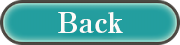
<style>
.page{position:relative;width:180px;height:45px}
.page>*{position:absolute;margin:0}
.t1{font:28px "RyuminPro-ExBold";color:#fdfbf9}
</style>
<div class="page">
<p class="t1" style="left:58px;top:12px;width:65px;height:21px">Back</p>
</div>
